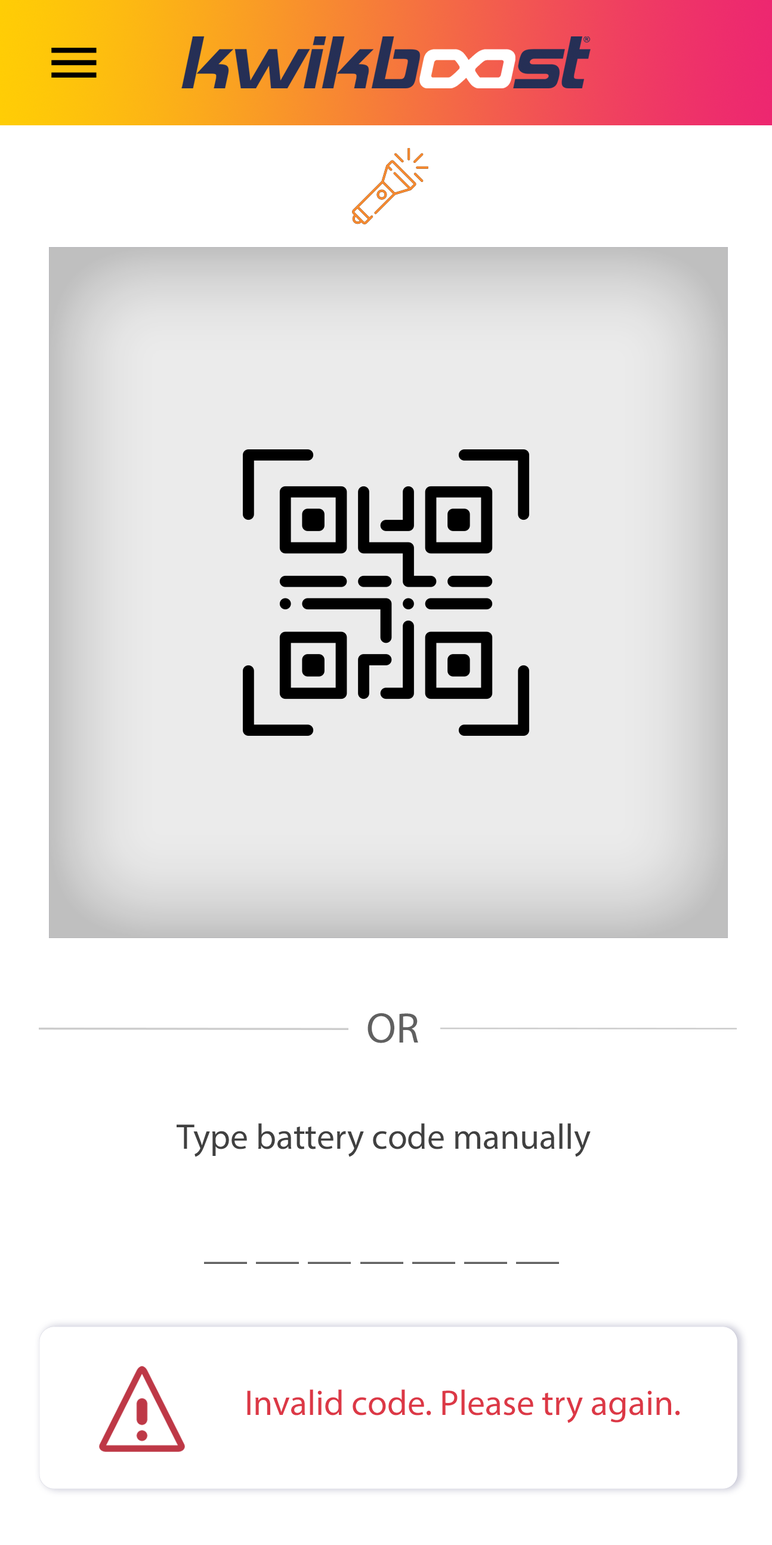
<style>
.page{position:relative;width:772px;height:1545px;background:#ffffff}
.page>*{position:absolute;margin:0}
.t1{font:43px "MyriadPro-Regular";color:#606060}
.t2{font:35.8px "MyriadPro-Regular";color:#404040}
.t3{font:35.8px "MyriadPro-Regular";color:#dc3846}
</style>
<div class="page">
<p class="t1" style="left:368px;top:1012px;width:50px;height:31px">OR</p>
<p class="t2" style="left:177px;top:1123px;width:414px;height:34px">Type battery code manually</p>
<p class="t1" style="left:204px;top:1261px;width:355px;height:3px">__ __ __ __ __ __ __</p>
<p class="t3" style="left:247px;top:1389px;width:433px;height:34px">Invalid code. Please try again.</p>
</div>
